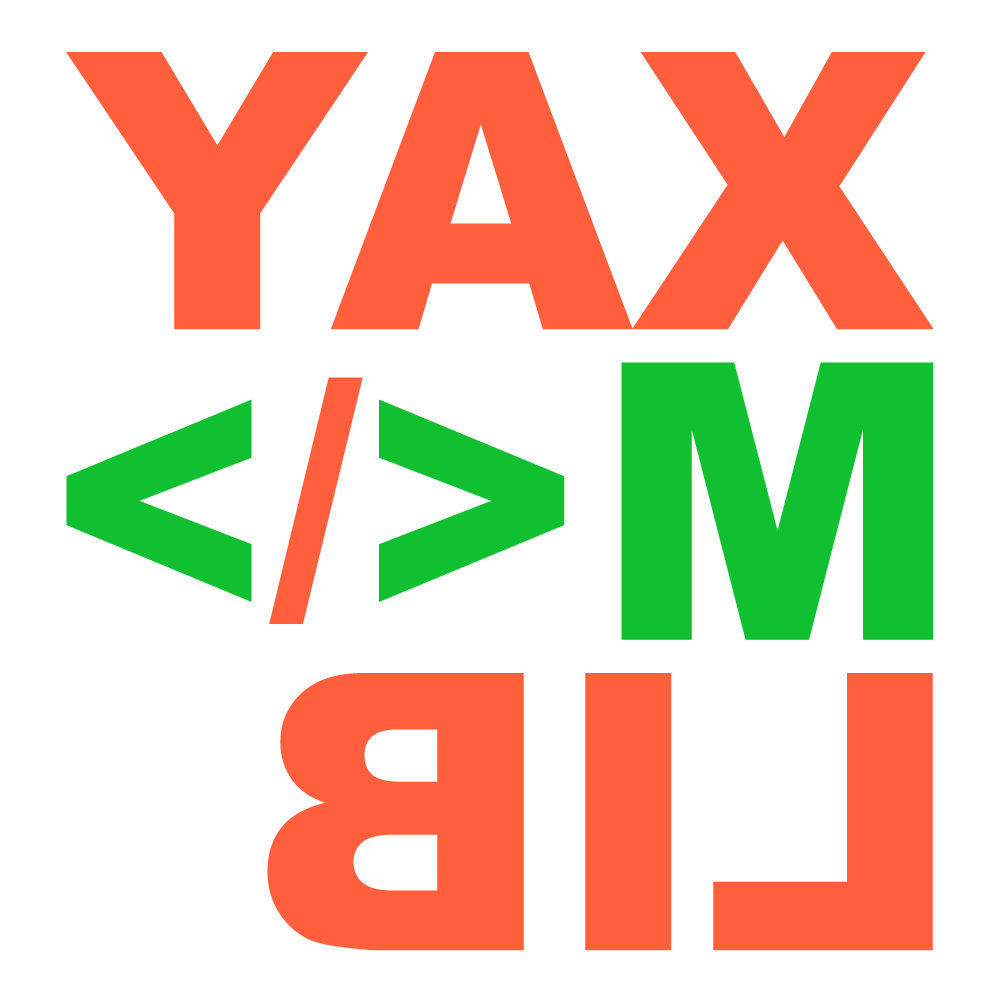
<style>
.page{position:relative;width:1000px;height:1000px;background:#ffffff}
.page>*{position:absolute;margin:0}
.t1{font:387.1px "Arial-Black";color:#ff5f3d}
.t2{font:387.1px "Arial-Black";color:#10c030}
.t3{font:333.4px "Arial-Black";color:#10c030}
.t4{font:333.4px "Arial-Black";color:#ff5f3d}
</style>
<div class="page">
<p class="t1" style="left:66px;top:52px;width:868px;height:278px">YAX</p>
<p class="t2" style="left:621px;top:362px;width:313px;height:278px">M</p>
<p class="t3" style="left:66px;top:377px;width:499px;height:247px">&lt;<span class="t4">/</span>&gt;</p>
<p class="t1" style="left:267px;top:673px;width:666px;height:278px;rotate:180deg">LIB</p>
</div>
